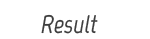
<style>
.page{position:relative;width:150px;height:39px;background:#ffffff}
.page>*{position:absolute;margin:0}
.t1{font:25.4px "Marvel-BoldItalic";color:#3e3e3e}
</style>
<div class="page">
<p class="t1" style="left:41px;top:14px;width:57px;height:20px">Result</p>
</div>
